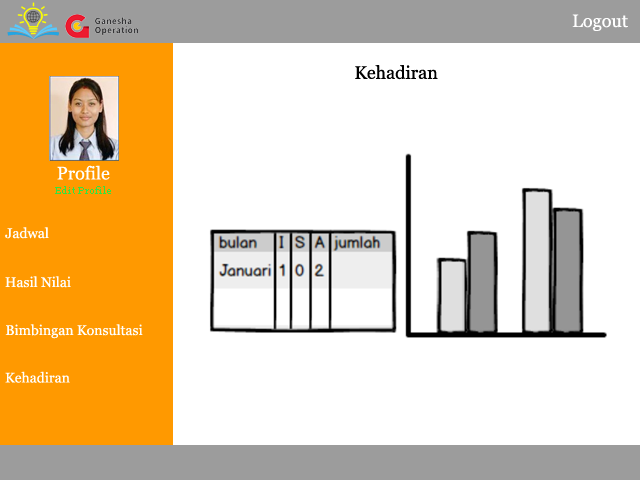
<style>
.page{position:relative;width:640px;height:480px;background:#ffffff}
.page>*{position:absolute;margin:0}
.t1{font:18px "Georgia";color:#ffffff}
.t2{font:18px "Georgia";color:#000000}
.t3{font:10px "Georgia";color:#34e340}
.t4{font:14px "Georgia";color:#ffffff}
</style>
<div class="page">
<p class="t1" style="left:572px;top:14px;width:56px;height:17px">Logout</p>
<p class="t2" style="left:355px;top:65px;width:83px;height:15px">Kehadiran</p>
<p class="t1" style="left:57px;top:165px;width:53px;height:15px">Profile</p>
<p class="t3" style="left:55px;top:186px;width:56px;height:8px">Edit Profile</p>
<p class="t4" style="left:5px;top:227px;width:44px;height:12px">Jadwal</p>
<p class="t4" style="left:5px;top:276px;width:66px;height:12px">Hasil Nilai</p>
<p class="t4" style="left:5px;top:324px;width:138px;height:15px">Bimbingan Konsultasi</p>
<p class="t4" style="left:5px;top:371px;width:65px;height:12px">Kehadiran</p>
</div>
